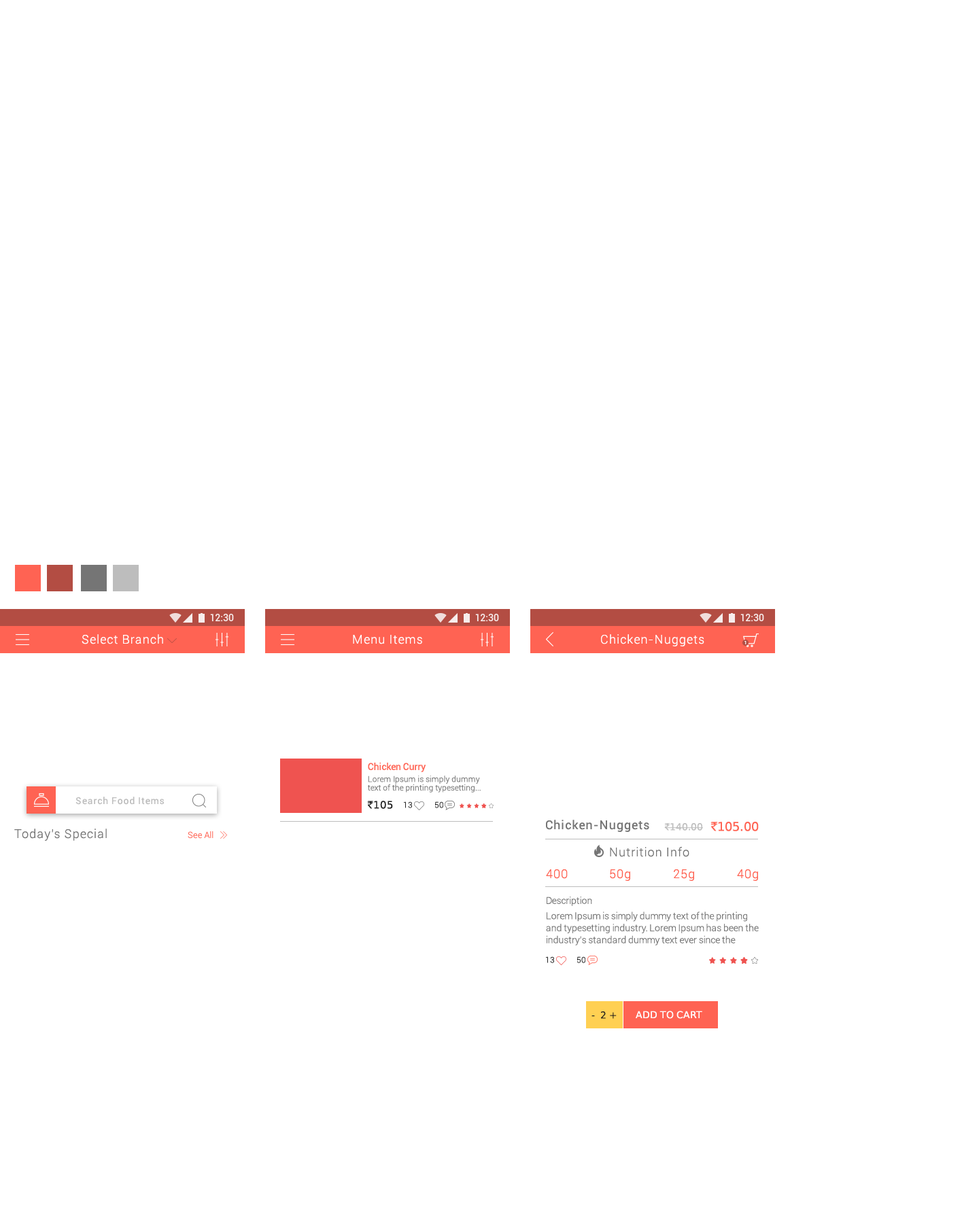
<style>
.page{position:relative;width:979px;height:1218px;background:#ffffff}
.page>*{position:absolute;margin:0}
.t1{font:12.2px "Roboto-Light";letter-spacing:0.06em;color:#ffffff}
.t2{font:4.6px "Roboto-Medium";letter-spacing:0.06em;color:#ffffff}
.t3{font:8.2px/8.6px "Roboto-Light";letter-spacing:-0.01em;color:#757575}
.t4{font:9.5px/8.6px "Roboto-Regular";letter-spacing:-0.01em;color:#ff6353}
.t5{font:9.5px "Roboto-Regular";letter-spacing:0.06em;color:#bdbdbd}
.t6{font:10.2px "RupeeForadian";color:#212121}
.t7{font:8.2px "Roboto-Light";color:#212121}
.t8{font:12.2px "Roboto-Regular";letter-spacing:0.06em;color:#757575}
.t9{font:9.5px "RupeeForadian";color:#bdbdbd}
.t10{font:12.2px "RupeeForadian";color:#ff6353}
.t11{font:12.2px "Roboto-Light";letter-spacing:0.06em;color:#757575}
.t12{font:8.8px "Roboto-Light";letter-spacing:-0.01em;color:#ff6353}
.t13{font:12.2px "Roboto-Light";letter-spacing:0.06em;color:#ff6353}
.t14{font:9.5px/12px "Roboto-Light";letter-spacing:-0.01em;color:#757575}
.t15{font:9.5px/8.6px "Roboto-Light";letter-spacing:-0.01em;color:#757575}
.t16{font:9.5px "RupeeForadian";color:#212121}
.t17{font:9.5px "RupeeForadian";color:#ffffff;text-transform:uppercase}
</style>
<div class="page">
<p class="t1" style="left:82px;top:634px;width:81px;height:10px">Select Branch</p>
<p class="t1" style="left:353px;top:635px;width:69px;height:9px">Menu Items</p>
<p class="t1" style="left:601px;top:634px;width:103px;height:12px">Chicken-Nuggets</p>
<p class="t2" style="left:744px;top:641px;width:2px;height:3px">1</p>
<p class="t3" style="left:368px;top:763px;width:113px;height:30px"><span class="t4">Chicken Curry<br></span>Lorem Ipsum is simply dummy text of the printing typesetting...</p>
<p class="t5" style="left:75px;top:797px;width:90px;height:8px">Search Food Items</p>
<p class="t6" style="left:367px;top:801px;width:26px;height:8px">`105</p>
<p class="t7" style="left:404px;top:801px;width:8px;height:7px">13</p>
<p class="t7" style="left:435px;top:801px;width:8px;height:7px">50</p>
<p class="t8" style="left:546px;top:820px;width:103px;height:12px">Chicken-Nuggets</p>
<p class="t9" style="left:664px;top:822px;width:95px;height:9px">`140.00 <span class="t10"> `105.00</span></p>
<p class="t11" style="left:14px;top:829px;width:93px;height:12px">Today's Special</p>
<p class="t12" style="left:188px;top:831px;width:25px;height:8px">See All</p>
<p class="t11" style="left:610px;top:847px;width:79px;height:10px">Nutrition Info</p>
<p class="t13" style="left:546px;top:869px;width:22px;height:10px">400</p>
<p class="t13" style="left:610px;top:869px;width:20px;height:12px">50g</p>
<p class="t13" style="left:674px;top:869px;width:20px;height:12px">25g</p>
<p class="t13" style="left:737px;top:869px;width:21px;height:12px">40g</p>
<p class="t14" style="left:546px;top:897px;width:213px;height:49px">Description<br>Lorem Ipsum is simply dummy text of the printing and typesetting industry. Lorem Ipsum has been the industry's standard dummy text ever since the 1500s, when an unknown printer took a galley of <span class="t15">type and scrambled it to make a type specimen</span></p>
<p class="t7" style="left:546px;top:956px;width:8px;height:7px">13</p>
<p class="t7" style="left:577px;top:956px;width:8px;height:7px">50</p>
<p class="t16" style="left:591px;top:1012px;width:26px;height:7px">-  2 +</p>
<p class="t17" style="left:636px;top:1011px;width:66px;height:8px">Add to cart</p>
</div>
